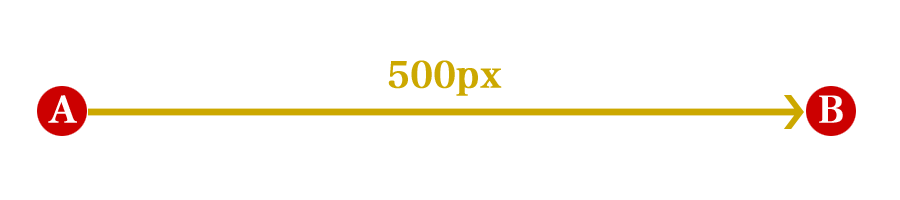
<style>
.page{position:relative;width:900px;height:200px;background:#ffffff}
.page>*{position:absolute;margin:0}
.t1{font:36px "HiraMinPro-W6";color:#cca800;font-weight:bold}
.t2{font:36px "HiraMinPro-W6";color:#fffefe;font-weight:bold}
</style>
<div class="page">
<p class="t1" style="left:388px;top:60px;width:114px;height:36px">500px</p>
<p class="t2" style="left:48px;top:95px;width:29px;height:28px">A</p>
<p class="t2" style="left:819px;top:95px;width:24px;height:28px">B</p>
</div>
